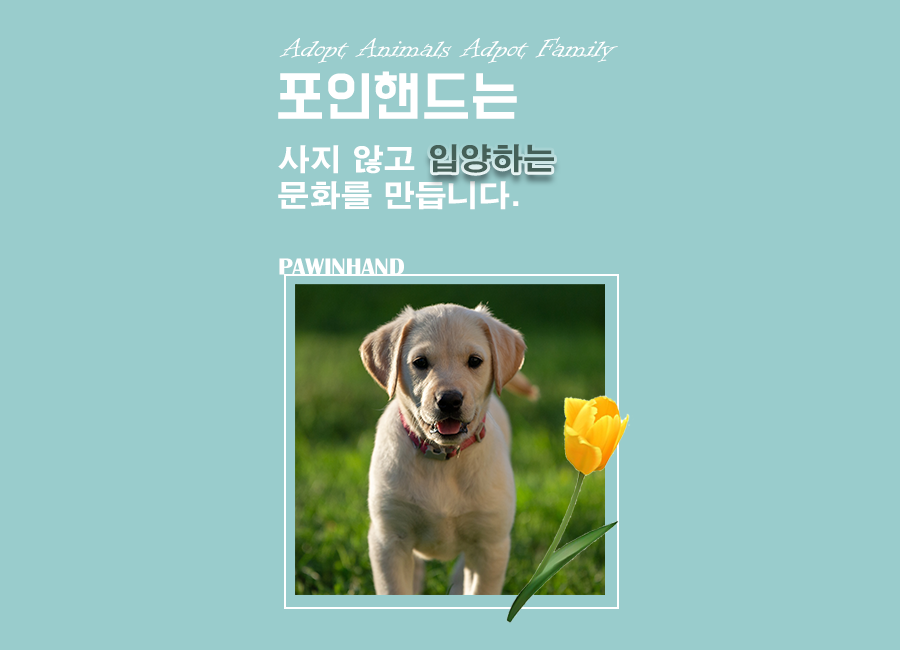
<style>
.page{position:relative;width:900px;height:650px;background:#99cccc}
.page>*{position:absolute;margin:0}
.t1{font:30px "InformalRoman-Regular";color:#ffffff;scale:1.06 1}
.t2{font:48px "BMDoHyeon";color:#ffffff;scale:1.06 1}
.t3{font:30px "H2gtrE";color:#ffffff;scale:1.06 1}
.t4{font:30px "H2gtrE";color:#456058;scale:1.06 1}
.t5{font:23.9px "BritannicBold";color:#ffffff}
</style>
<div class="page">
<p class="t1" style="left:279px;top:37px;width:339px;height:27px">Adopt Animals Adpot Family</p>
<p class="t2" style="left:278px;top:71px;width:239px;height:48px">포인핸드는</p>
<p class="t3" style="left:278px;top:145px;width:241px;height:65px;text-align:center">사지 않고<br>          문화를 만듭니다.</p>
<p class="t4" style="left:430px;top:144px;width:124px;height:29px">입양하는</p>
<p class="t5" style="left:279px;top:258px;width:125px;height:17px">PAWINHAND</p>
</div>
